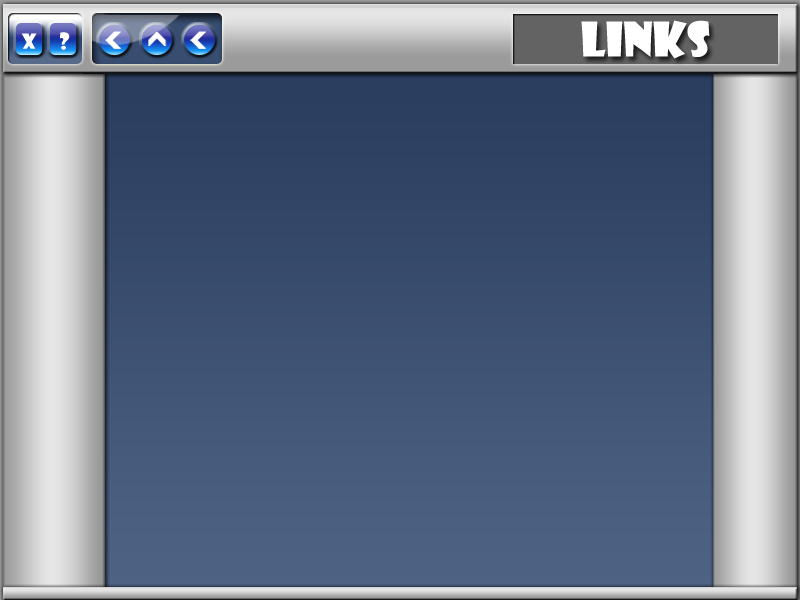
<style>
.page{position:relative;width:800px;height:600px}
.page>*{position:absolute;margin:0}
.t1{font:46.5px "ShowcardGothic-Reg";color:#ffffff}
.t2{font:20.2px "ShowcardGothic-Reg";color:#ffffff}
.t3{font:22.1px "ShowcardGothic-Reg";color:#ffffff}
</style>
<div class="page">
<p class="t1" style="left:581px;top:20px;width:129px;height:39px">LINKS</p>
<p class="t2" style="left:21px;top:33px;width:16px;height:16px">x</p>
<p class="t3" style="left:60px;top:32px;width:10px;height:18px">?</p>
</div>
